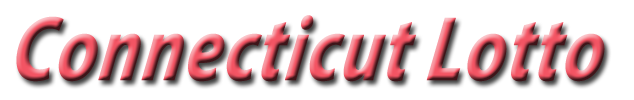
<style>
.page{position:relative;width:634px;height:100px;background:#ffffff}
.page>*{position:absolute;margin:0}
.t1{font:92px "MyriadPro-BoldIt";font-weight:bold;font-style:italic;scale:0.79 1}
</style>
<div class="page">
<p class="t1" style="left:16px;top:15px;width:589px;height:67px">Connecticut Lotto</p>
</div>
